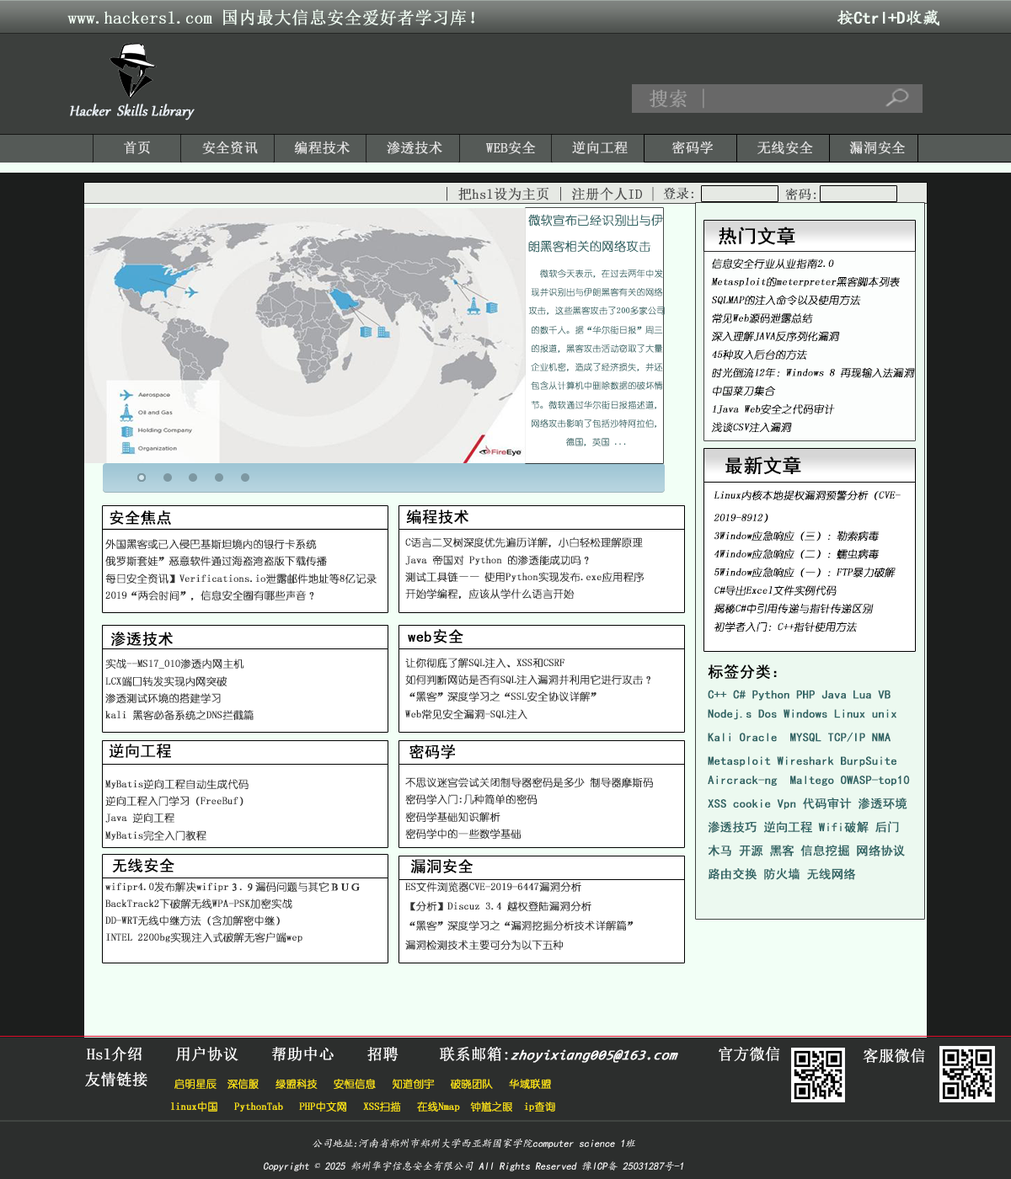
<style>
.page{position:relative;width:1011px;height:1179px}
.page>*{position:absolute;margin:0}
.t1{font:17.1px "SimSun";color:#f2fff5;font-weight:bold}
.t2{font:17.1px "¿¬Ìå";color:#f2fff5;font-weight:bold}
.t3{font:19.3px "SimSun";color:#9b9b9b;font-weight:bold}
.t4{font:17.1px "Gabriola";color:#eaf0f6;font-weight:bold;font-style:italic}
.t5{font:13.7px "SimSun";color:#e4e4e4;font-weight:bold}
.t6{font:13.7px "SimSun";color:#4c4c4c;font-weight:bold}
.t7{font:12.8px "SimSun";color:#414244;font-weight:bold}
.t8{font:12px "YouYuan";color:#336666;font-weight:bold}
.t9{font:18.7px "SimHei";color:#000000;font-weight:bold}
.t10{font:8.6px "YouYuan";color:#336666;font-weight:bold}
.t11{font:10.3px "YouYuan";color:#000000;font-weight:bold;font-style:italic}
.t12{font:18.8px "SimHei";color:#000000;font-weight:bold}
.t13{font:15.4px "SimHei";color:#000000;font-weight:bold}
.t14{font:10.3px/17.1px "YouYuan";color:#333333;font-weight:bold}
.t15{font:10.3px/19.3px "YouYuan";color:#333333;font-weight:bold}
.t16{font:12px/23.5px "SimHei";color:#336666;font-weight:bold}
.t17{font:15.4px "SimSun";color:#ffffff;font-weight:bold}
.t18{font:10.3px "STFangsong";color:#ffffff}
.t19{font:13.7px "Consolas-Italic";color:#ffffff;font-weight:bold;font-style:italic}
.t20{font:10.3px "YouYuan";color:#ffe613;font-weight:bold}
.t21{font:10.3px "¿¬Ìå";color:#ffffff;font-style:italic}
.t22{font:10.3px "SimSun";color:#ffffff;font-style:italic}
</style>
<div class="page">
<p class="t1" style="left:67px;top:9px;width:872px;height:17px">www.hackersl.com 国内最大信息安全爱好者学习库！                                      <span class="t2"> 按Ctrl+D收藏</span></p>
<p class="t3" style="left:649px;top:88px;width:55px;height:21px">搜索 |</p>
<p class="t4" style="left:70px;top:104px;width:125px;height:16px">Hacker  Skills Library</p>
<p class="t5" style="left:124px;top:141px;width:781px;height:13px">首页       安全资讯     编程技术     渗透技术      WEB安全     逆向工程      密码学      无线安全     漏洞安全</p>
<p class="t6" style="left:447px;top:187px;width:207px;height:14px">| 把hsl设为主页 | 注册个人ID |</p>
<p class="t7" style="left:663px;top:187px;width:30px;height:13px">登录:</p>
<p class="t7" style="left:785px;top:188px;width:31px;height:13px">密码:</p>
<p class="t8" style="left:528px;top:214px;width:135px;height:39px;text-align:center">微软宣布已经识别出与伊<br>朗黑客相关的网络攻击</p>
<p class="t9" style="left:719px;top:227px;width:76px;height:18px">热门文章</p>
<p class="t10" style="left:528px;top:269px;width:137px;height:178px;text-align:center"><span class="t8"><br><br>   <br></span>  微软今天表示，在过去两年中发现并识别出与伊朗黑客有关的网络攻击，这些黑客攻击了200多家公司的数千人。据“华尔街日报”周三的报道，黑客攻击活动窃取了大量企业机密，造成了经济损失，并还包含从计算机中删除数据的破坏情节。微软通过华尔街日报描述道，网络攻击影响了包括沙特阿拉伯，德国，英国 ...</p>
<p class="t11" style="left:711px;top:259px;width:204px;height:174px">信息安全行业从业指南2.0<br>Metasploit的meterpreter黑客脚本列表<br>SQLMAP的注入命令以及使用方法<br>常见Web源码泄露总结<br>深入理解JAVA反序列化漏洞<br>45种攻入后台的方法<br>时光倒流12年：Windows 8 再现输入法漏洞<br>中国菜刀集合<br>1Java Web安全之代码审计<br>浅谈CSV注入漏洞</p>
<p class="t12" style="left:725px;top:457px;width:76px;height:17px">最新文章</p>
<p class="t11" style="left:714px;top:490px;width:187px;height:143px">Linux内核本地提权漏洞预警分析（CVE-2019-8912）<br>3Window应急响应（三）：勒索病毒<br>4Window应急响应（二）：蠕虫病毒<br>5Window应急响应（一）：FTP暴力破解<br>C#导出Excel文件实例代码<br>揭秘C#中引用传递与指针传递区别<br>初学者入门：C++指针使用方法</p>
<p class="t13" style="left:406px;top:510px;width:62px;height:15px">编程技术</p>
<p class="t13" style="left:110px;top:511px;width:61px;height:15px">安全焦点</p>
<p class="t14" style="left:105px;top:539px;width:272px;height:404px">外国黑客或已入侵巴基斯坦境内的银行卡系统             <br>俄罗斯套娃”恶意软件通过海盗湾盗版下载传播<br>每日安全资讯】Verifications.io泄露邮件地址等8亿记录<br>2019“两会时间”，信息安全圈有哪些声音？ <br><br><br><br>实战--MS17_010渗透内网主机<br>LCX端口转发实现内网突破 <br>渗透测试环境的搭建学习<br>kali 黑客必备系统之DNS拦截篇<br><br><br><br>MyBatis逆向工程自动生成代码<br>逆向工程入门学习（FreeBuf）<br>Java 逆向工程 <br>MyBatis完全入门教程<br><br><br>wifipr4.0发布解决wifipr３.９漏码问题与其它ＢＵＧ<br>BackTrack2下破解无线WPA-PSK加密实战<br>DD-WRT无线中继方法（含加解密中继）<br>INTEL 2200bg实现注入式破解无客户端wep</p>
<p class="t14" style="left:405px;top:538px;width:248px;height:412px">C语言二叉树深度优先遍历详解，小白轻松理解原理<br>Java 帝国对 Python 的渗透能成功吗？ <br>测试工具链—— 使用Python实现发布.exe应用程序<br>开始学编程，应该从学什么语言开始<br><br><br><br>让你彻底了解SQL注入、XSS和CSRF <br>如何判断网站是否有SQL注入漏洞并利用它进行攻击？<br>“黑客”深度学习之“SSL安全协议详解”<br>Web常见安全漏洞-SQL注入 <br><br><br><br>不思议迷宫尝试关闭制导器密码是多少 制导器摩斯码 <br>密码学入门:几种简单的密码<br>密码学基础知识解析<br>密码学中的一些数学基础<br><br><span class="t15"><br>ES文件浏览器CVE-2019-6447漏洞分析<br>【分析】Discuz 3.4 越权登陆漏洞分析<br>“黑客”深度学习之“漏洞挖掘分析技术详解篇”<br>漏洞检测技术主要可分为以下五种</span></p>
<p class="t13" style="left:408px;top:629px;width:55px;height:15px">web安全</p>
<p class="t13" style="left:110px;top:632px;width:63px;height:15px">渗透技术</p>
<p class="t13" style="left:708px;top:665px;width:69px;height:15px">标签分类：</p>
<p class="t16" style="left:708px;top:690px;width:202px;height:190px">C++ C# Python PHP Java Lua VB<br>Nodej.s Dos Windows Linux unix Kali Oracle  MYSQL TCP/IP NMA  Metasploit Wireshark BurpSuite<br>Aircrack-ng  Maltego OWASP-top10 XSS cookie Vpn 代码审计 渗透环境 渗透技巧 逆向工程 Wifi破解 后门 木马 开源 黑客 信息挖掘 网络协议 路由交换 防火墙 无线网络</p>
<p class="t13" style="left:109px;top:744px;width:62px;height:15px">逆向工程</p>
<p class="t13" style="left:409px;top:745px;width:46px;height:15px">密码学</p>
<p class="t13" style="left:112px;top:858px;width:62px;height:15px">无线安全</p>
<p class="t13" style="left:410px;top:859px;width:63px;height:15px">漏洞安全</p>
<p class="t17" style="left:87px;top:1047px;width:693px;height:16px"><span class="t18"><br></span><br>Hsl介绍    用户协议    帮助中心    招聘     联系邮箱:<span class="t19">zhoyixiang005@163.com</span>     官方微信</p>
<p class="t17" style="left:863px;top:1049px;width:62px;height:14px">客服微信</p>
<p class="t17" style="left:85px;top:1072px;width:62px;height:15px">友情链接</p>
<p class="t20" style="left:171px;top:1079px;width:384px;height:33px;text-align:center">启明星辰  深信服   绿盟科技   安恒信息   知道创宇   破晓团队   华域联盟<br>linux中国   PythonTab   PHP中文网   XSS扫描   在线Nmap  钟馗之眼  ip查询</p>
<p class="t21" style="left:264px;top:1139px;width:419px;height:33px;text-align:center">公司地址:河南省郑州市郑州大学西亚斯国家学院computer science 1班<br>Copyright <span class="t22">©</span> 2025 郑州华宇信息安全有限公司 All Rights Reserved 豫ICP备 25031287号-1</p>
</div>
